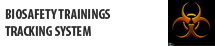
<style>
.page{position:relative;width:215px;height:46px;background:#ffffff}
.page>*{position:absolute;margin:0}
.t1{font:14px "MyriadPro-BoldCond";color:#2c2c2c}
</style>
<div class="page">
<p class="t1" style="left:5px;top:9px;width:106px;height:27px">BIOSAFETY TRAININGS<br>TRACKING SYSTEM</p>
</div>
